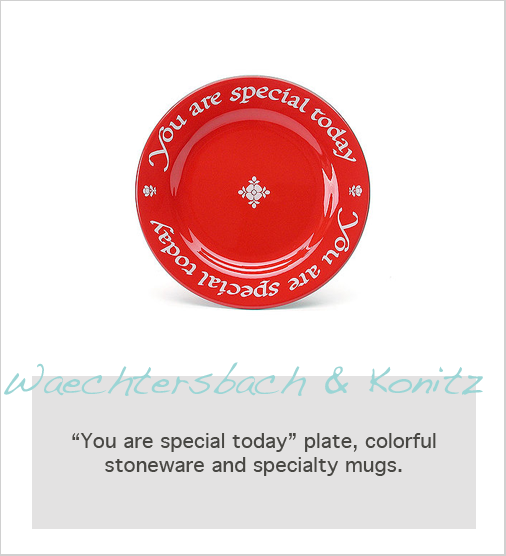
<style>
.page{position:relative;width:506px;height:556px;background:#ffffff}
.page>*{position:absolute;margin:0}
.t1{font:40px "Handwriting-Dakota";color:#9bd5d5}
.t2{font:20px "Geneva";color:#484743}
</style>
<div class="page">
<p class="t1" style="left:4px;top:362px;width:479px;height:34px">Waechtersbach &amp; Konitz</p>
<p class="t2" style="left:72px;top:433px;width:364px;height:43px;text-align:center">“You are special today” plate, colorful stoneware and specialty mugs.</p>
</div>
